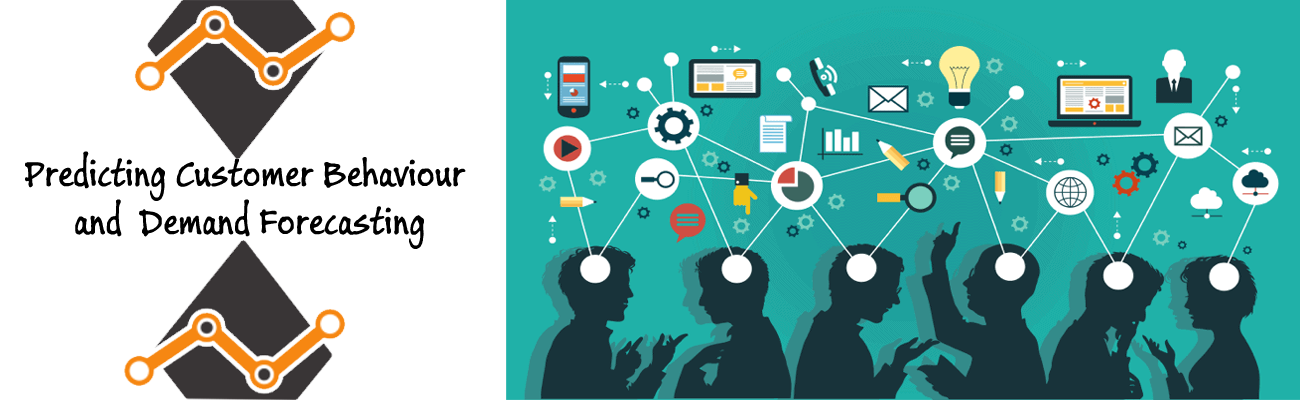
<style>
.page{position:relative;width:1300px;height:400px;background:#ffffff}
.page>*{position:absolute;margin:0}
.t1{font:40px "BuxtonSketch";color:#000000}
</style>
<div class="page">
<p class="t1" style="left:25px;top:151px;width:441px;height:98px;text-align:center">Predicting Customer Behaviour<br> and  Demand Forecasting</p>
</div>
